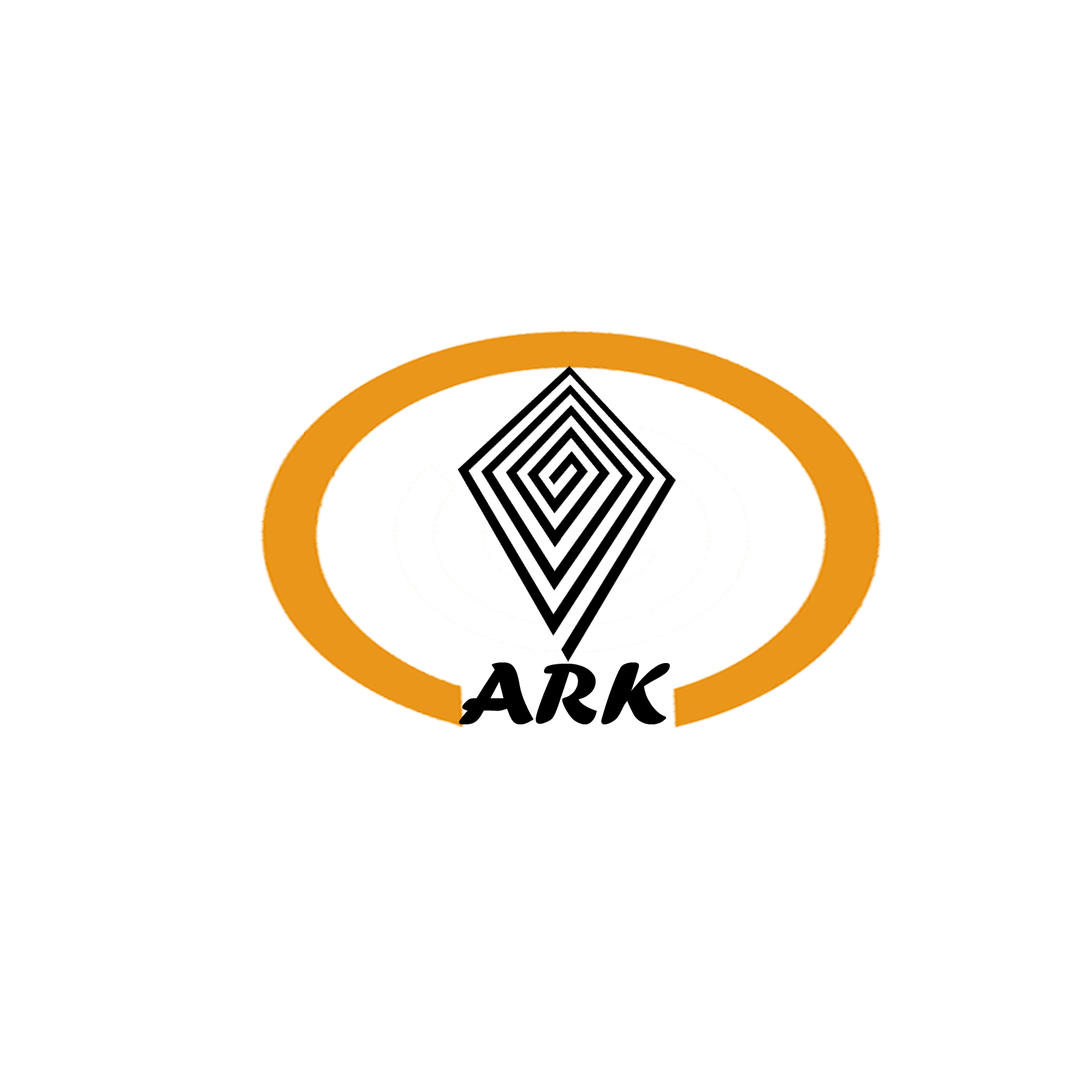
<style>
.page{position:relative;width:1092px;height:1092px;background:#ffffff}
.page>*{position:absolute;margin:0}
.t1{font:92.2px "ForteMT";color:#000000;scale:1.13 1}
</style>
<div class="page">
<p class="t1" style="left:459px;top:662px;width:211px;height:62px">ARK</p>
</div>
